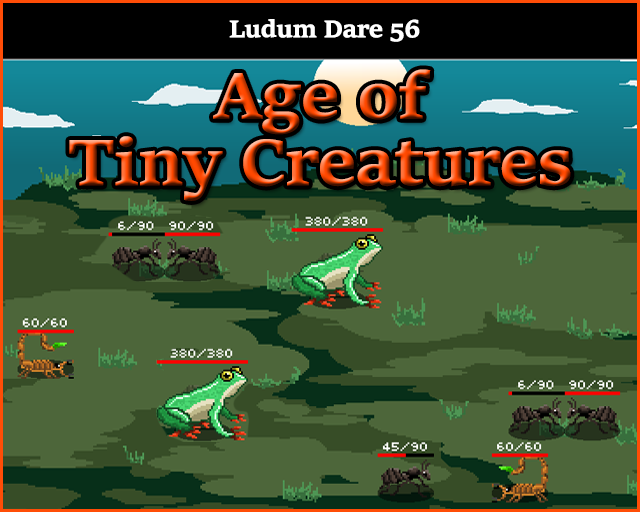
<style>
.page{position:relative;width:640px;height:512px;background:#4d663a}
.page>*{position:absolute;margin:0}
.t1{font:26px "SitkaText-Bold";letter-spacing:-0.04em;color:#ffffff;font-weight:bold}
.t2{font:70.4px/66.5px "SitkaText-Bold";letter-spacing:-0.04em;font-weight:bold}
</style>
<div class="page">
<p class="t1" style="left:229px;top:19px;width:191px;height:23px">Ludum Dare 56</p>
<p class="t2" style="left:69px;top:69px;width:502px;height:132px;text-align:center">Age of<br>Tiny Creatures</p>
</div>
